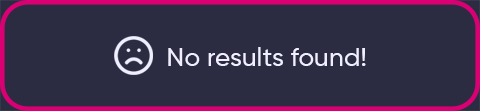
<style>
.page{position:relative;width:480px;height:111px;background:#2b2b42}
.page>*{position:absolute;margin:0}
.t1{font:26.5px "Gilroy-Medium";color:#efefff}
</style>
<div class="page">
<p class="t1" style="left:168px;top:47px;width:198px;height:19px">No results found!</p>
</div>
